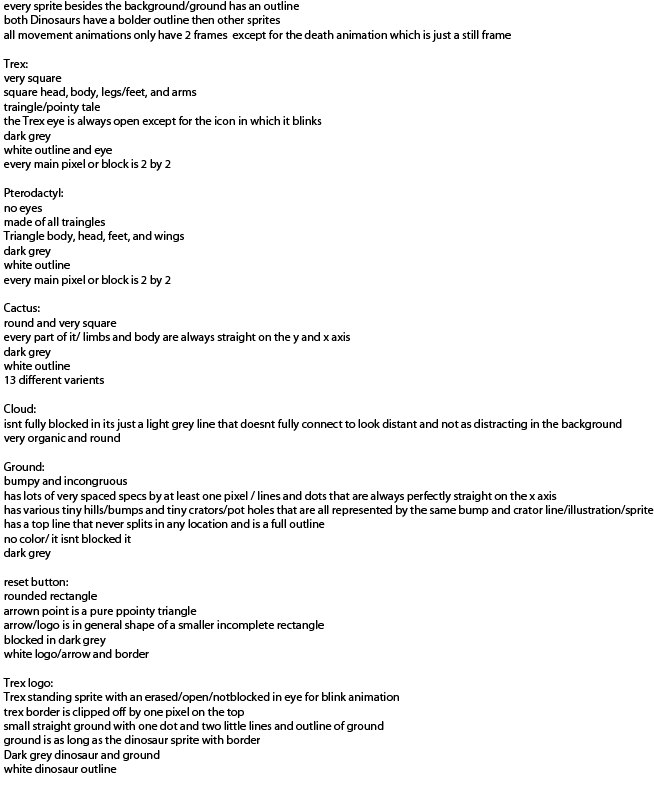
<style>
.page{position:relative;width:654px;height:785px;background:#ffffff}
.page>*{position:absolute;margin:0}
.t1{font:12px "MyriadPro-Regular";color:#000000}
</style>
<div class="page">
<p class="t1" style="left:3px;top:1px;width:651px;height:772px">every sprite besides the background/ground has an outline<br>both Dinosaurs have a bolder outline then other sprites <br>all movement animations only have 2 frames  except for the death animation which is just a still frame<br><br>Trex:<br>very square <br>square head, body, legs/feet, and arms<br>traingle/pointy tale<br>the Trex eye is always open except for the icon in which it blinks<br>dark grey <br>white outline and eye<br>every main pixel or block is 2 by 2<br><br>Pterodactyl:<br>no eyes<br>made of all traingles<br>Triangle body, head, feet, and wings<br>dark grey <br>white outline<br>every main pixel or block is 2 by 2<br><br>Cactus: <br>round and very square <br>every part of it/ limbs and body are always straight on the y and x axis<br>dark grey<br>white outline <br>13 different varients <br><br>Cloud:<br>isnt fully blocked in its just a light grey line that doesnt fully connect to look distant and not as distracting in the background<br>very organic and round <br><br>Ground:<br>bumpy and incongruous <br>has lots of very spaced specs by at least one pixel / lines and dots that are always perfectly straight on the x axis<br>has various tiny hills/bumps and tiny crators/pot holes that are all represented by the same bump and crator line/illustration/sprite<br>has a top line that never splits in any location and is a full outline <br>no color/ it isnt blocked it<br>dark grey<br><br>reset button: <br>rounded rectangle <br>arrown point is a pure ppointy triangle<br>arrow/logo is in general shape of a smaller incomplete rectangle<br>blocked in dark grey<br>white logo/arrow and border<br><br>Trex logo:<br>Trex standing sprite with an erased/open/notblocked in eye for blink animation<br>trex border is clipped off by one pixel on the top <br>small straight ground with one dot and two little lines and outline of ground <br>ground is as long as the dinosaur sprite with border <br>Dark grey dinosaur and ground<br>white dinosaur outline</p>
</div>
